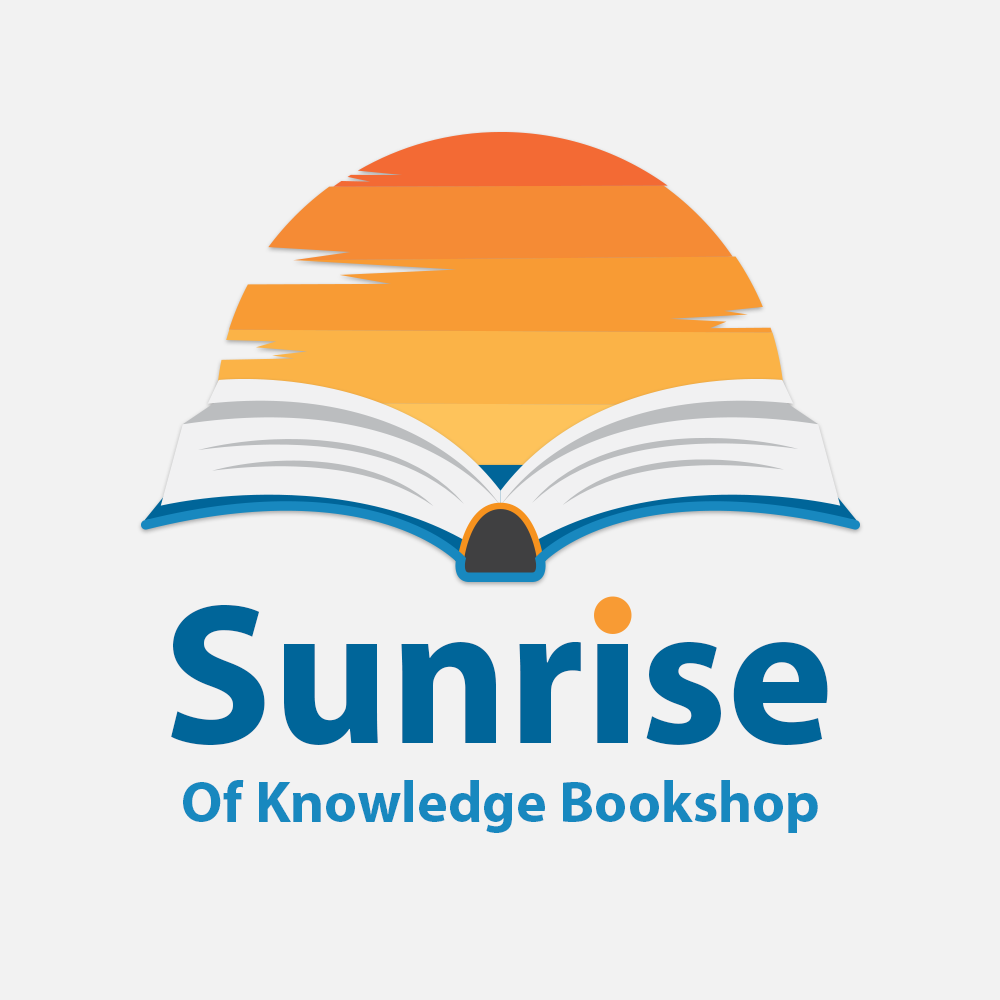
<style>
.page{position:relative;width:1000px;height:1000px;background:#f2f2f2}
.page>*{position:absolute;margin:0}
.t1{font:201.6px "MyriadPro-Bold";color:#006599}
.t2{font:58px "MyriadPro-Bold";color:#1888bf}
</style>
<div class="page">
<p class="t1" style="left:171px;top:601px;width:657px;height:145px">Sunrise</p>
<p class="t2" style="left:183px;top:780px;width:635px;height:53px">Of Knowledge Bookshop</p>
</div>
